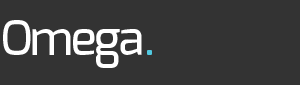
<style>
.page{position:relative;width:300px;height:85px;background:#333333}
.page>*{position:absolute;margin:0}
.t1{font:48px "Exo-Medium";letter-spacing:-0.04em;color:#ffffff}
.t2{font:48px "Exo-Regular";letter-spacing:-0.04em;color:#51c9e0}
</style>
<div class="page">
<p class="t1" style="left:3px;top:20px;width:139px;height:48px">Omega</p>
<p class="t2" style="left:147px;top:50px;width:5px;height:5px">.</p>
</div>
